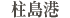
<style>
.page{position:relative;width:70px;height:18px;background:#ffffff}
.page>*{position:absolute;margin:0}
.t1{font:18px "RyuminPr6N-ExBold";color:#4c4843;scale:0.9 1}
</style>
<div class="page">
<p class="t1" style="left:11px;top:0px;width:48px;height:18px">柱島港</p>
</div>
